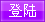
<style>
.page{position:relative;width:45px;height:22px}
.page>*{position:absolute;margin:0}
.t1{font:14px "NSimSun";color:#ffffff}
</style>
<div class="page">
<p class="t1" style="left:9px;top:4px;width:27px;height:13px">登陆</p>
</div>
